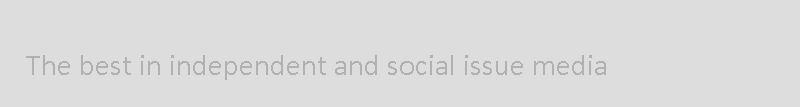
<style>
.page{position:relative;width:800px;height:107px;background:#dddddd}
.page>*{position:absolute;margin:0}
.t1{font:30px "Calibri";color:#b3b0b0}
</style>
<div class="page">
<p class="t1" style="left:26px;top:55px;width:580px;height:25px">The best in independent and social issue media</p>
</div>
